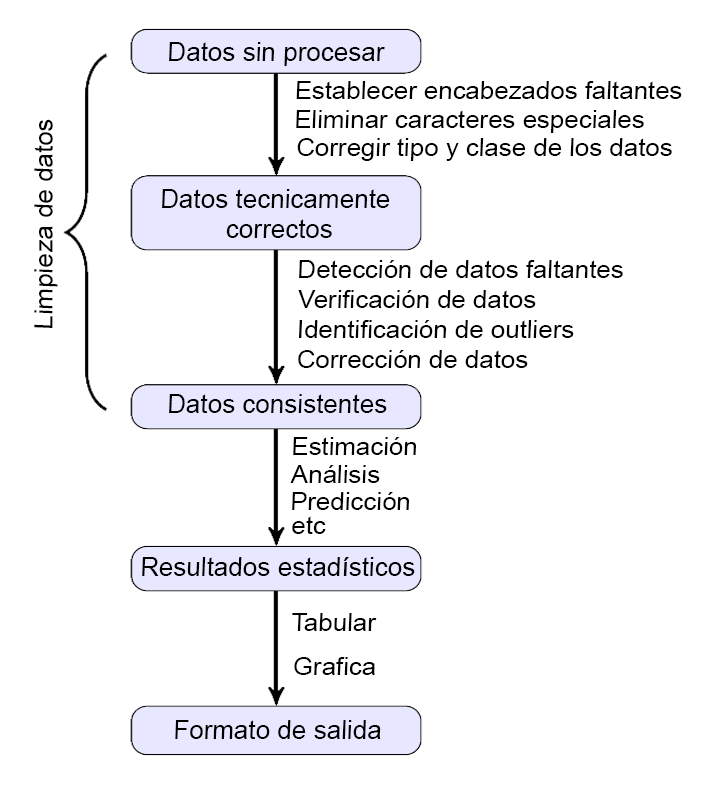
<style>
.page{position:relative;width:718px;height:791px;background:#ffffff}
.page>*{position:absolute;margin:0}
.t1{font:25.8px "ArialMT";color:#000000;font-style:italic}
.t2{font:25.6px "ArialMT";color:#000000;font-style:italic}
.t3{font:25.8px/30px "ArialMT";color:#000000;font-style:italic}
</style>
<div class="page">
<p class="t1" style="left:169px;top:42px;width:216px;height:24px">Datos sin procesar</p>
<p class="t2" style="left:296px;top:81px;width:386px;height:18px">Establecer encabezados faltantes</p>
<p class="t2" style="left:296px;top:110px;width:348px;height:23px">Eliminar caracteres especiales</p>
<p class="t1" style="left:34px;top:119px;width:24px;height:209px;rotate:-90deg">Limpieza de datos</p>
<p class="t2" style="left:297px;top:138px;width:375px;height:23px">Corregir tipo y clase de los datos</p>
<p class="t3" style="left:162px;top:189px;width:228px;height:49px;text-align:center">Datos tecnicamente<br>correctos</p>
<p class="t2" style="left:299px;top:260px;width:324px;height:18px">Detección de datos faltantes</p>
<p class="t2" style="left:298px;top:290px;width:238px;height:18px">Verificación de datos</p>
<p class="t2" style="left:298px;top:320px;width:276px;height:18px">Identificación de outliers</p>
<p class="t2" style="left:298px;top:350px;width:230px;height:18px">Corrección de datos</p>
<p class="t1" style="left:169px;top:394px;width:218px;height:19px">Datos consistentes</p>
<p class="t2" style="left:293px;top:437px;width:123px;height:18px">Estimación</p>
<p class="t2" style="left:290px;top:465px;width:90px;height:18px">Análisis</p>
<p class="t2" style="left:292px;top:492px;width:117px;height:18px">Predicción</p>
<p class="t2" style="left:292px;top:516px;width:34px;height:18px">etc</p>
<p class="t1" style="left:142px;top:557px;width:273px;height:19px">Resultados estadísticos</p>
<p class="t2" style="left:292px;top:613px;width:85px;height:18px">Tabular</p>
<p class="t2" style="left:294px;top:657px;width:81px;height:18px">Grafica</p>
<p class="t1" style="left:175px;top:720px;width:206px;height:19px">Formato de salida</p>
</div>
